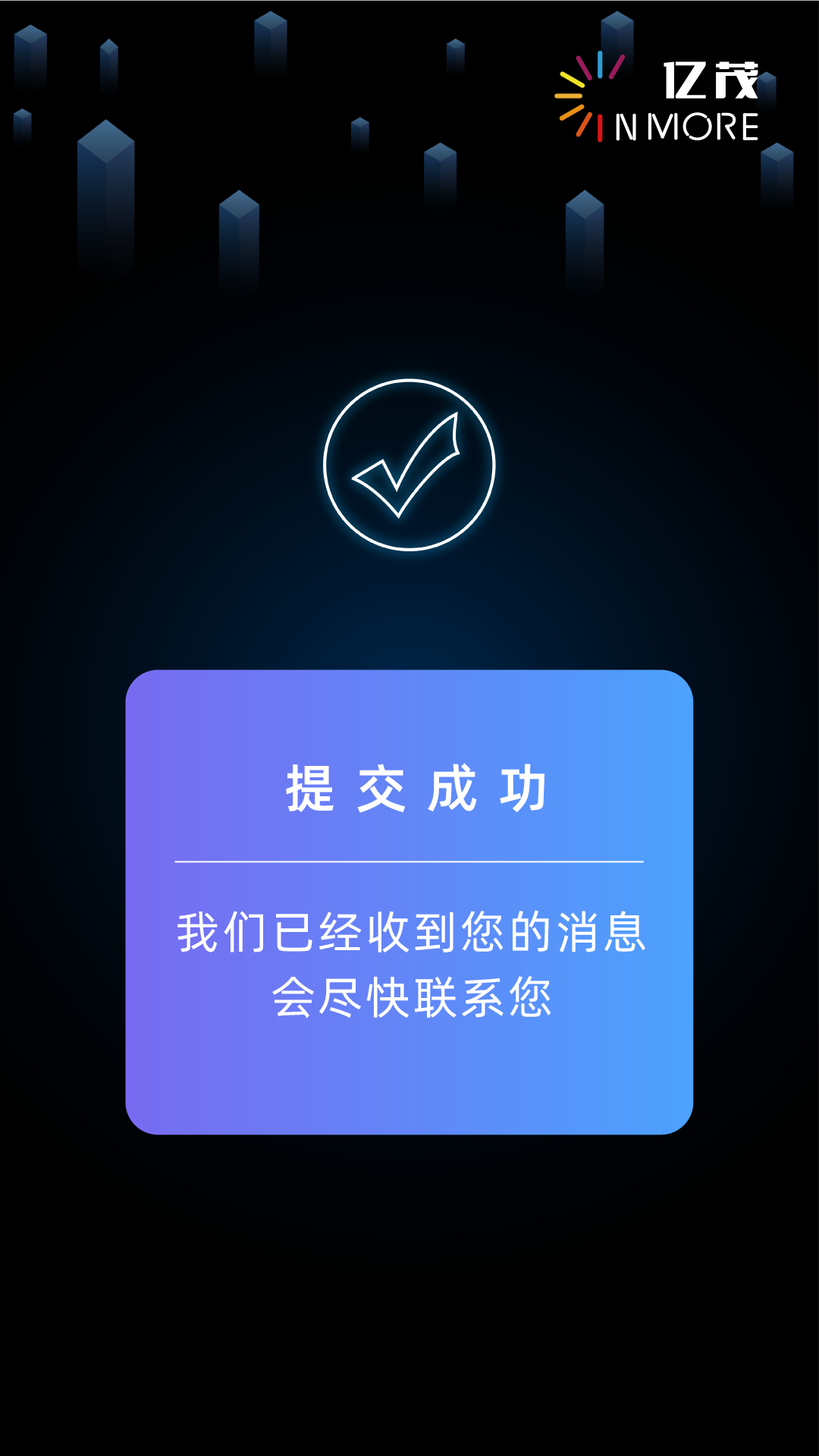
<style>
.page{position:relative;width:819px;height:1456px;background:#000000}
.page>*{position:absolute;margin:0}
.t1{font:52.3px "Alibaba-PuHuiTi-M";letter-spacing:0.38em;color:#ffffff}
.t2{font:45.5px/65.2px "Alibaba-PuHuiTi-R";letter-spacing:0.06em;color:#ffffff}
</style>
<div class="page">
<p class="t1" style="left:286px;top:763px;width:258px;height:50px">提交成功</p>
<p class="t2" style="left:177px;top:910px;width:468px;height:108px;text-align:center">我们已经收到您的消息<br>会尽快联系您</p>
</div>
